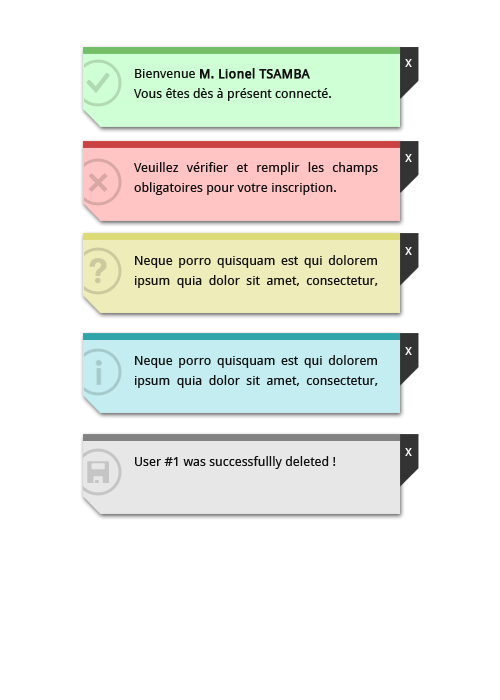
<style>
.page{position:relative;width:500px;height:700px;background:#ffffff}
.page>*{position:absolute;margin:0}
.t1{font:14px "DroidSans";color:#ffffff}
.t2{font:13px/20px "DroidSans";color:#121111}
.t3{font:13px/20px "DroidSans";color:#121111;font-weight:bold}
.t4{font:13px "DroidSans";color:#121111}
</style>
<div class="page">
<p class="t1" style="left:405px;top:59px;width:7px;height:8px">x</p>
<p class="t2" style="left:134px;top:68px;width:197px;height:33px;text-align:justify">Bienvenue <span class="t3">M. Lionel TSAMBA<br></span>Vous êtes dès à présent connecté.</p>
<p class="t1" style="left:405px;top:154px;width:7px;height:8px">x</p>
<p class="t2" style="left:134px;top:162px;width:244px;height:33px;text-align:justify">Veuillez vérifier et remplir les champs obligatoires pour votre inscription.</p>
<p class="t2" style="left:135px;top:255px;width:243px;height:33px;text-align:justify">Neque porro quisquam est qui dolorem ipsum quia dolor sit amet, consectetur, adipisci velit</p>
<p class="t1" style="left:405px;top:247px;width:7px;height:8px">x</p>
<p class="t1" style="left:405px;top:347px;width:7px;height:8px">x</p>
<p class="t2" style="left:135px;top:355px;width:243px;height:33px;text-align:justify">Neque porro quisquam est qui dolorem ipsum quia dolor sit amet, consectetur, adipisci velit</p>
<p class="t1" style="left:405px;top:448px;width:7px;height:8px">x</p>
<p class="t4" style="left:135px;top:456px;width:201px;height:13px">User #1 was successfullly deleted !</p>
</div>
